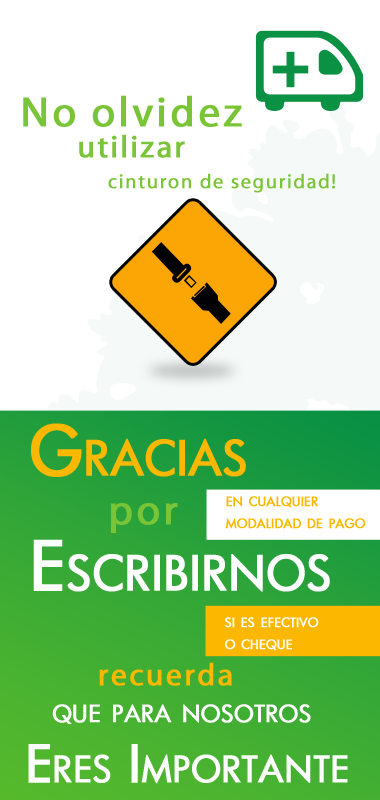
<style>
.page{position:relative;width:380px;height:800px;background:#ffffff}
.page>*{position:absolute;margin:0}
.t1{font:20.2px/31.2px "MyriadPro-Regular";letter-spacing:0.06em;color:#7ac537;font-weight:bold}
.t2{font:42.5px/31.2px "MyriadPro-Regular";letter-spacing:0.06em;color:#7ac537;font-weight:bold}
.t3{font:31.3px/31.2px "MyriadPro-Regular";letter-spacing:0.06em;color:#7ac537;font-weight:bold}
.t4{font:66.7px/115.3px "Futura-Medium";color:#ffffff;font-variant:small-caps;font-weight:bold}
.t5{font:66.7px "Futura-Medium";color:#fcb800;font-variant:small-caps;font-weight:bold}
.t6{font:18.2px "Futura-Medium";color:#fcb800;font-variant:small-caps;font-weight:bold}
.t7{font:42.5px "MyriadPro-Regular";letter-spacing:0.06em;color:#7ac537;font-weight:bold}
.t8{font:18.2px "Futura-Medium";color:#ffffff;font-variant:small-caps;font-weight:bold}
.t9{font:31.3px "MyriadPro-Regular";letter-spacing:0.06em;color:#fcb800;font-weight:bold}
.t10{font:33.4px "Futura-Medium";color:#ffffff;font-variant:small-caps;font-weight:bold}
.t11{font:50.6px "Futura-Medium";color:#ffffff;font-variant:small-caps;font-weight:bold}
</style>
<div class="page">
<p class="t1" style="left:23px;top:95px;width:312px;height:98px;text-align:center"><span class="t2">No olvidez<br></span><span class="t3">utilizar <br>     </span>cinturon de seguridad!</p>
<p class="t4" style="left:31px;top:423px;width:299px;height:169px"><span class="t5">Gracias<br></span>Escribirnos</p>
<p class="t6" style="left:225px;top:496px;width:141px;height:33px">en cualquier <br>modalidad de pago</p>
<p class="t7" style="left:110px;top:503px;width:68px;height:30px">por</p>
<p class="t8" style="left:225px;top:617px;width:94px;height:34px">si es efectivo <br>o cheque</p>
<p class="t9" style="left:99px;top:662px;width:133px;height:24px">recuerda</p>
<p class="t10" style="left:52px;top:704px;width:259px;height:20px">que para nosotros</p>
<p class="t11" style="left:28px;top:744px;width:320px;height:40px">Eres Importante</p>
</div>
